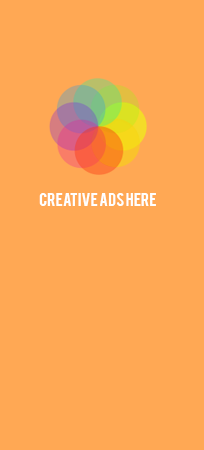
<style>
.page{position:relative;width:204px;height:450px;background:#ffa854}
.page>*{position:absolute;margin:0}
.t1{font:15px "Bebas";color:#ffffff}
</style>
<div class="page">
<p class="t1" style="left:39px;top:193px;width:117px;height:13px">creative ads here</p>
</div>
